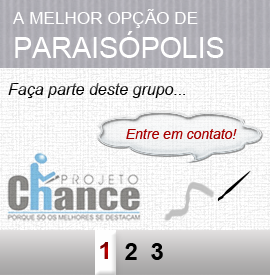
<style>
.page{position:relative;width:270px;height:275px}
.page>*{position:absolute;margin:0}
.t1{font:17.2px "ArialMT";color:#ffffff}
.t2{font:28.6px "ArialMT";color:#ffffff}
.t3{font:16px "Arial-ItalicMT"}
.t4{font:14px "Arial-ItalicMT";color:#a80000}
.t5{font:24px "Arial-BoldMT"}
.t6{font:24px "Arial-BoldMT";color:#000000}
</style>
<div class="page">
<p class="t1" style="left:13px;top:9px;width:211px;height:49px">A MELHOR OPÇÃO DE <br><span class="t2">PARAISÓPOLIS</span></p>
<p class="t3" style="left:8px;top:83px;width:177px;height:15px">Faça parte deste grupo...</p>
<p class="t4" style="left:126px;top:129px;width:111px;height:10px">Entre em contato!</p>
<p class="t5" style="left:100px;top:242px;width:8px;height:17px">1</p>
<p class="t6" style="left:125px;top:243px;width:12px;height:17px">2</p>
<p class="t6" style="left:151px;top:243px;width:12px;height:17px">3</p>
</div>
